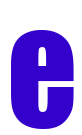
<style>
.page{position:relative;width:82px;height:135px;background:#ffffff}
.page>*{position:absolute;margin:0}
.t1{font:147.3px "Impact";color:#3300cc;scale:0.93 1}
</style>
<div class="page">
<p class="t1" style="left:11px;top:30px;width:63px;height:99px">e</p>
</div>
